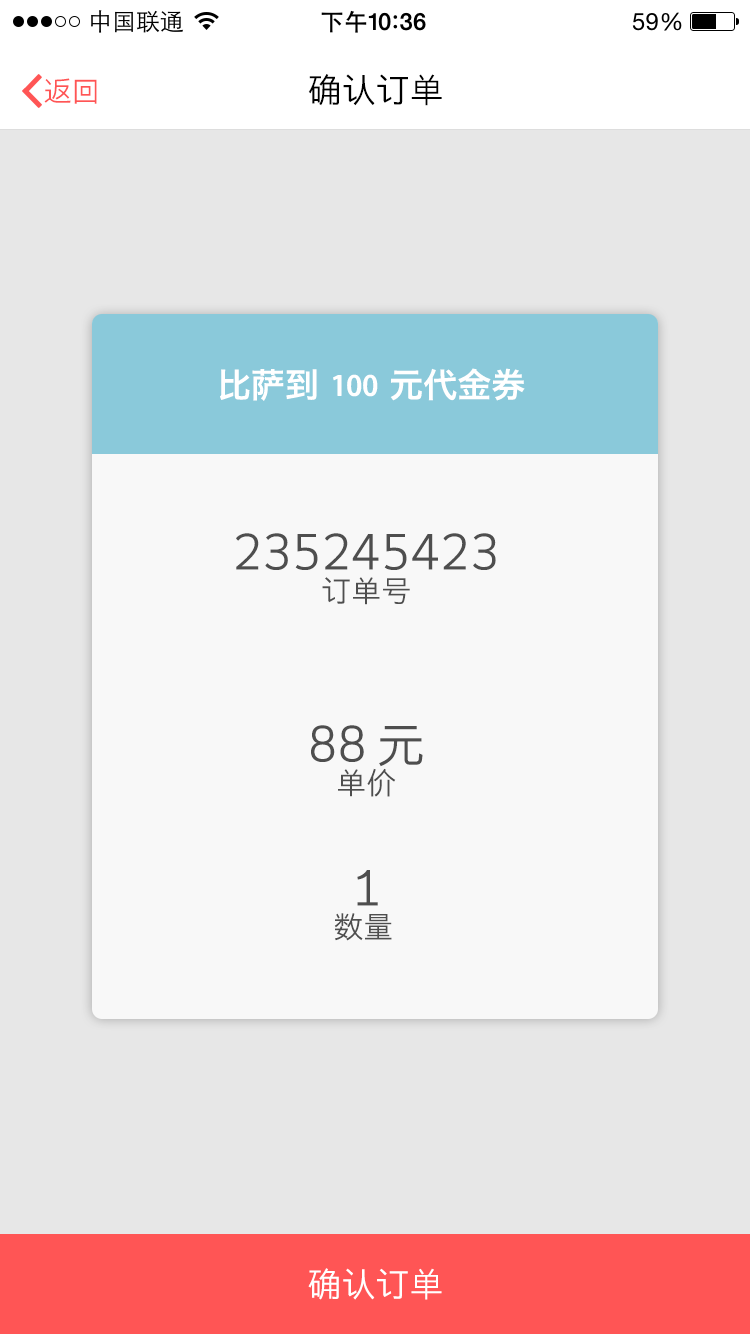
<style>
.page{position:relative;width:750px;height:1334px;background:#e7e7e7}
.page>*{position:absolute;margin:0}
.t1{font:28px "STHeitiSC-Light";color:#ff5555}
.t2{font:34px "STHeitiSC-Light";color:#000000}
.t3{font:34px "STHeitiSC-Medium";color:#ffffff}
.t4{font:48px/48px "STHeitiSC-Light";color:#4f4f4f}
.t5{font:30px/48px "STHeitiSC-Light";color:#4f4f4f}
.t6{font:34px "STHeitiSC-Light";color:#ffffff}
</style>
<div class="page">
<p class="t1" style="left:44px;top:78px;width:53px;height:26px">返回</p>
<p class="t2" style="left:308px;top:74px;width:134px;height:32px">确认订单</p>
<p class="t3" style="left:220px;top:368px;width:305px;height:33px">比萨到 100 元代金券</p>
<p class="t4" style="left:236px;top:533px;width:260px;height:408px;text-align:center">235245423<br><span class="t5">订单号<br><br><br></span>88 元<br><span class="t5">单价<br><br></span>1<br><span class="t5">数量</span></p>
<p class="t6" style="left:308px;top:1268px;width:134px;height:32px">确认订单</p>
</div>
